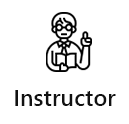
<style>
.page{position:relative;width:129px;height:124px;background:#ffffff}
.page>*{position:absolute;margin:0}
.t1{font:23.2px "YuGothicUI-Semibold";color:#111111}
</style>
<div class="page">
<p class="t1" style="left:15px;top:90px;width:101px;height:16px">Instructor</p>
</div>
